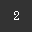
<style>
.page{position:relative;width:32px;height:32px;background:#333333}
.page>*{position:absolute;margin:0}
.t1{font:12px "CenturySchoolbook";letter-spacing:0.06em;color:#ffffff}
</style>
<div class="page">
<p class="t1" style="left:14px;top:11px;width:5px;height:9px">2</p>
</div>
